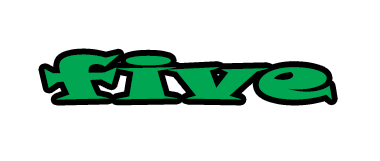
<style>
.page{position:relative;width:380px;height:161px;background:#ffffff}
.page>*{position:absolute;margin:0}
.t1{font:60px "SnapITC-Regular";color:#00a651;scale:2 1}
</style>
<div class="page">
<p class="t1" style="left:44px;top:54px;width:288px;height:46px">five</p>
</div>
